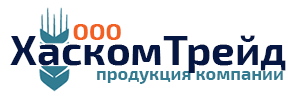
<style>
.page{position:relative;width:300px;height:100px;background:#ffffff}
.page>*{position:absolute;margin:0}
.t1{font:24px "Exo2-Bold";color:#f26022}
.t2{font:42px "Exo2-Bold";color:#051642}
.t3{font:18px "Exo2-Bold";color:#327c92}
</style>
<div class="page">
<p class="t1" style="left:73px;top:24px;width:48px;height:16px">ООО</p>
<p class="t2" style="left:10px;top:35px;width:276px;height:38px">ХаскомТрейд</p>
<p class="t3" style="left:97px;top:71px;width:186px;height:13px">продукция компании</p>
</div>
